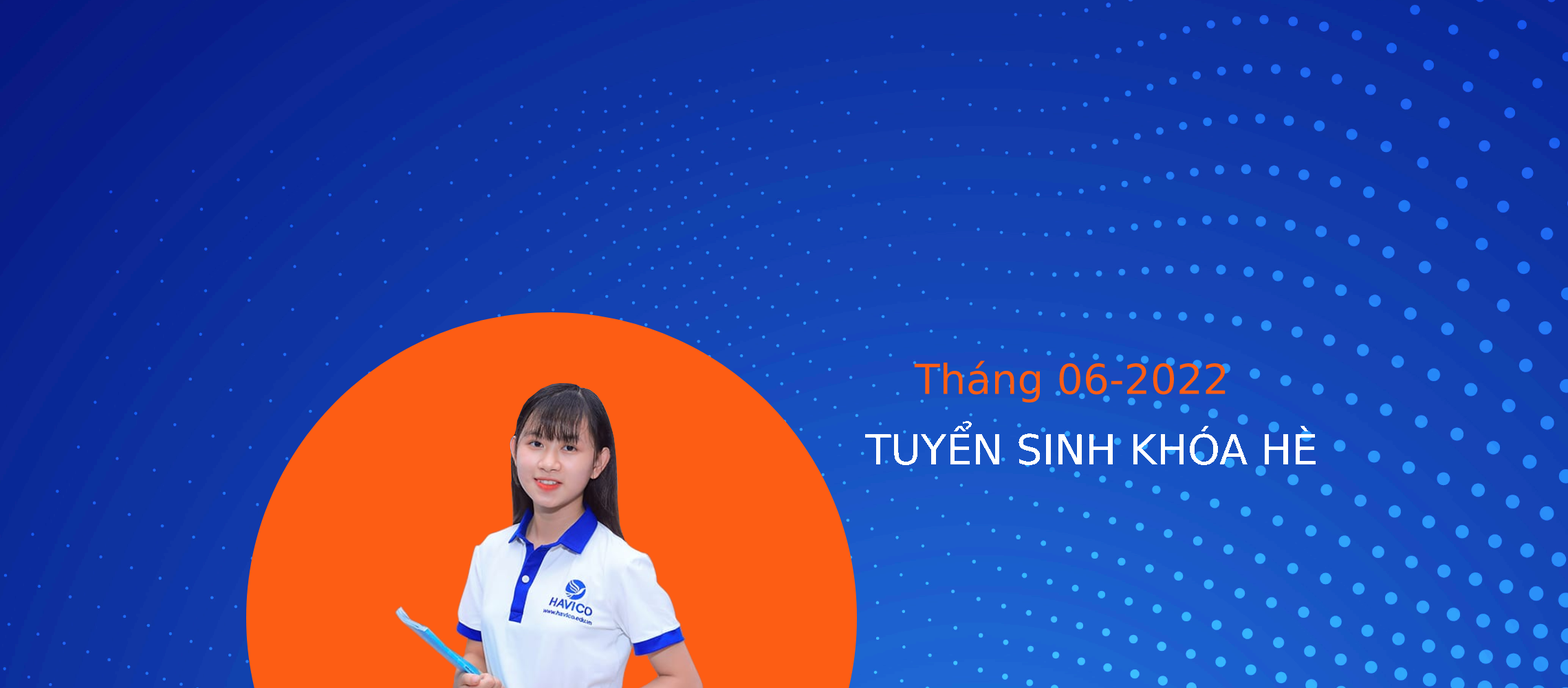
<style>
.page{position:relative;width:1568px;height:688px}
.page>*{position:absolute;margin:0}
.t1{font:41.3px "UTM HelvetIns";color:#fd5d14}
.t2{font:41.3px "UTM HelvetIns";color:#ffffff}
</style>
<div class="page">
<p class="t1" style="left:914px;top:360px;width:312px;height:43px">Tháng 06-2022</p>
<p class="t2" style="left:865px;top:421px;width:451px;height:44px">TUYỂN SINH KHÓA HÈ</p>
</div>
